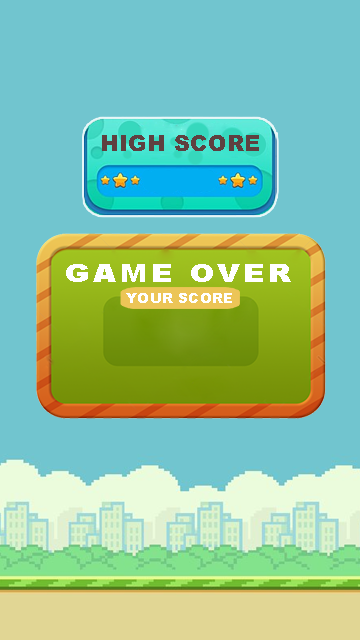
<style>
.page{position:relative;width:360px;height:640px;background:#71c5cf}
.page>*{position:absolute;margin:0}
.t1{font:22.3px "Arial-Black";letter-spacing:0.02em;color:#5f4040;text-transform:uppercase}
.t2{font:25.1px "Arial-Black";letter-spacing:0.12em;color:#ffffff;text-transform:uppercase;scale:1.18 1}
.t3{font:13.1px "Arial-Black";letter-spacing:-0.04em;color:#ffffff;text-transform:uppercase;scale:1.18 1}
</style>
<div class="page">
<p class="t1" style="left:102px;top:135px;width:157px;height:16px">HIGH SCORE</p>
<p class="t2" style="left:66px;top:264px;width:225px;height:18px">Game Over</p>
<p class="t3" style="left:126px;top:293px;width:106px;height:10px">your score</p>
</div>
